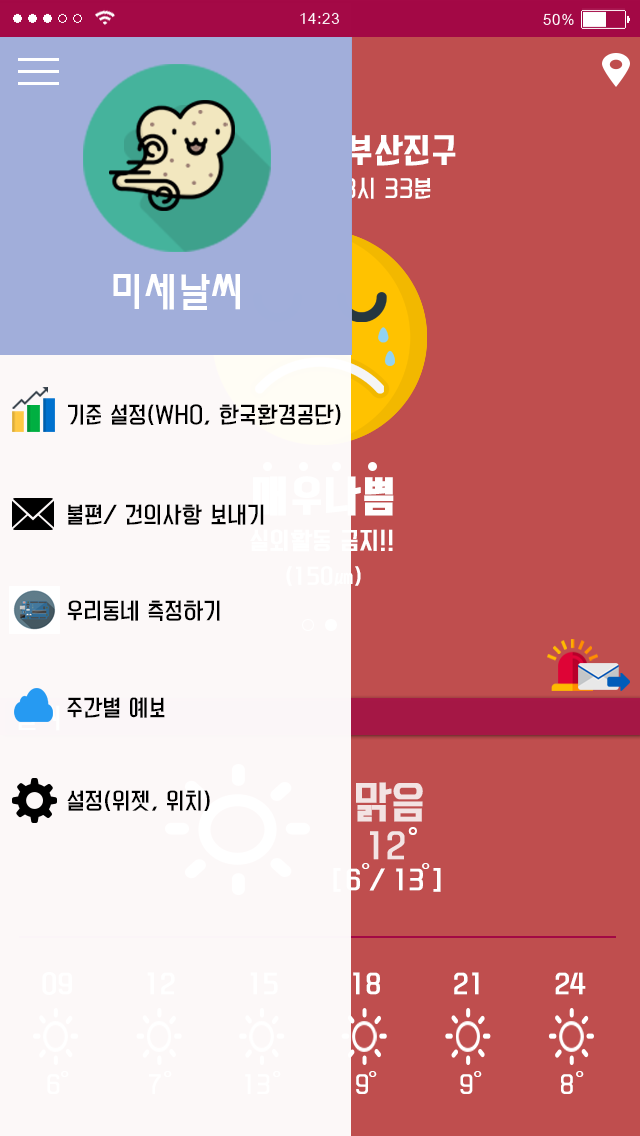
<style>
.page{position:relative;width:640px;height:1136px;background:#bf4e4e}
.page>*{position:absolute;margin:0}
.t1{font:32px "KoreanYNMYT-B";letter-spacing:0.025em}
.t2{font:22px "KoreanYNMYT-L";letter-spacing:0.025em}
.t3{font:40px "MoeumTR-HM";letter-spacing:0.025em;color:#ffffff}
.t4{font:21px "KoreanYNMYT-L";letter-spacing:0.025em;color:#000000}
.t5{font:40px "KoreanYNMYT-B";letter-spacing:0.025em;color:#ffffff;font-weight:bold}
.t6{font:22px "KoreanYNMYT-L";letter-spacing:0.025em;color:#ffffff;font-weight:bold}
.t7{font:40.4px "KoreanYNMYT-L";color:#f3e3e3;font-weight:bold}
.t8{font:31px "KoreanYNMYT-M";color:#f3e3e3}
.t9{font:32.1px "MoeumTR-HM";color:#ffffff}
.t10{font:24px "KoreanYNMYT-M";color:#ffffff}
.t11{font:28px "MoeumTR-HM";color:#ffffff}
</style>
<div class="page">
<p class="t1" style="left:193px;top:134px;width:263px;height:32px">부산광역시 부산진구</p>
<p class="t2" style="left:216px;top:177px;width:215px;height:22px">11월 27일 13시 33분</p>
<p class="t3" style="left:113px;top:274px;width:127px;height:36px">미세날씨</p>
<p class="t4" style="left:68px;top:404px;width:273px;height:21px">기준 설정(WHO, 한국환경공단)</p>
<p class="t5" style="left:253px;top:476px;width:141px;height:40px">매우나쁨</p>
<p class="t4" style="left:68px;top:504px;width:196px;height:21px">불편/ 건의사항 보내기</p>
<p class="t6" style="left:250px;top:529px;width:143px;height:23px">실외활동 금지!!</p>
<p class="t4" style="left:67px;top:600px;width:153px;height:21px">우리동네 측정하기</p>
<p class="t4" style="left:67px;top:697px;width:98px;height:21px">주간별 예보</p>
<p class="t7" style="left:356px;top:782px;width:67px;height:40px">맑음</p>
<p class="t4" style="left:67px;top:790px;width:143px;height:21px">설정(위젯, 위치)</p>
<p class="t8" style="left:370px;top:831px;width:35px;height:29px">12</p>
<p class="t9" style="left:408px;top:827px;width:9px;height:8px">°</p>
<p class="t10" style="left:333px;top:868px;width:108px;height:24px">[ 6 / 13 ]</p>
<p class="t11" style="left:362px;top:863px;width:8px;height:6px">°</p>
<p class="t11" style="left:422px;top:863px;width:8px;height:6px">°</p>
<p class="t11" style="left:61px;top:1071px;width:8px;height:6px">°</p>
<p class="t11" style="left:164px;top:1071px;width:8px;height:6px">°</p>
<p class="t11" style="left:273px;top:1071px;width:8px;height:6px">°</p>
<p class="t11" style="left:369px;top:1071px;width:8px;height:6px">°</p>
<p class="t11" style="left:474px;top:1071px;width:8px;height:6px">°</p>
<p class="t11" style="left:576px;top:1071px;width:8px;height:6px">°</p>
</div>
